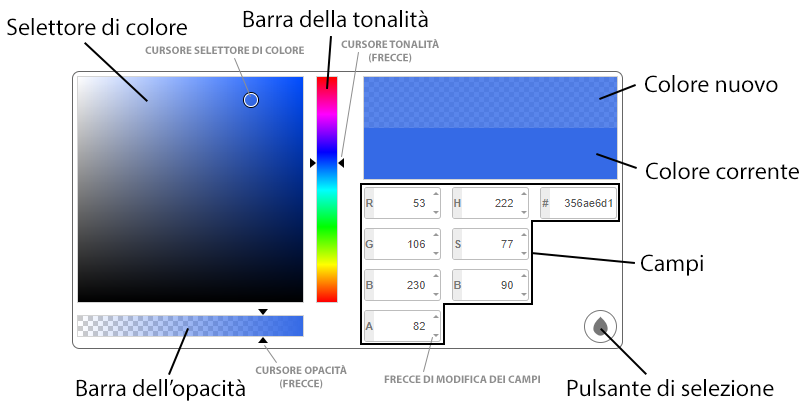
<style>
.page{position:relative;width:807px;height:411px;background:#ffffff}
.page>*{position:absolute;margin:0}
.t1{font:24px "MyriadPro-Regular";color:#000000}
.t2{font:11px "MyriadPro-Bold";color:#8e8e8e}
</style>
<div class="page">
<p class="t1" style="left:243px;top:10px;width:185px;height:18px">Barra della tonalità</p>
<p class="t1" style="left:7px;top:18px;width:180px;height:18px">Selettore di colore</p>
<p class="t2" style="left:341px;top:39px;width:98px;height:24px;text-align:center">CURSORE TONALITÀ<br>(FRECCE)</p>
<p class="t2" style="left:145px;top:46px;width:159px;height:8px">CURSORE SELETTORE DI COLORE</p>
<p class="t1" style="left:645px;top:75px;width:133px;height:18px">Colore nuovo</p>
<p class="t1" style="left:646px;top:162px;width:153px;height:18px">Colore corrente</p>
<p class="t1" style="left:641px;top:254px;width:62px;height:22px">Campi</p>
<p class="t2" style="left:255px;top:365px;width:92px;height:24px;text-align:center">CURSORE OPACITÀ<br>(FRECCE)</p>
<p class="t2" style="left:384px;top:375px;width:156px;height:8px">FRECCE DI MODIFICA DEI CAMPI</p>
<p class="t1" style="left:76px;top:379px;width:169px;height:22px">Barra dell’opacità</p>
<p class="t1" style="left:567px;top:379px;width:207px;height:18px">Pulsante di selezione</p>
</div>
